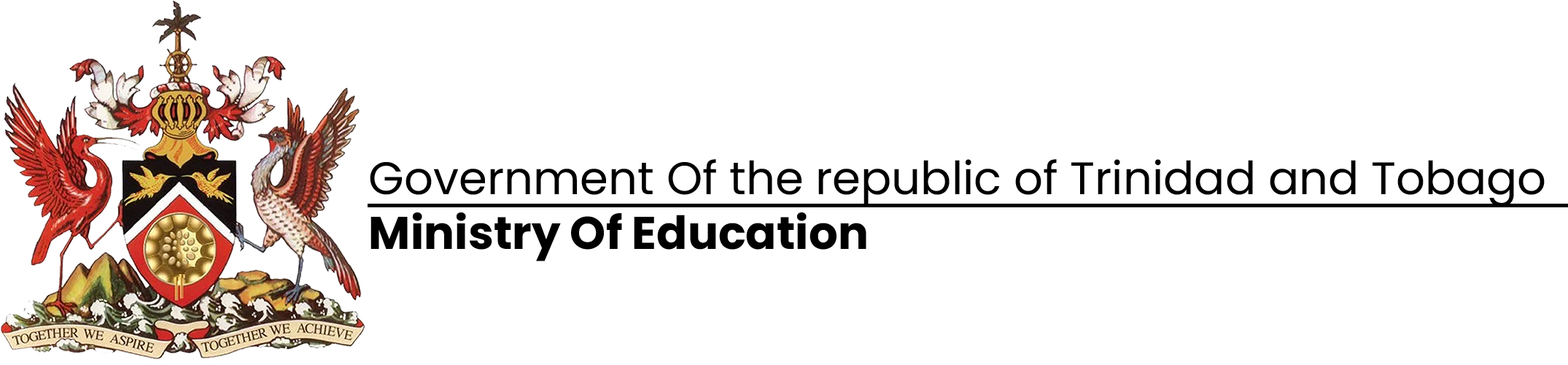
<style>
.page{position:relative;width:1568px;height:365px;background:#ffffff}
.page>*{position:absolute;margin:0}
.t1{font:45.6px "Poppins-Regular";color:#000000}
.t2{font:45.6px "Poppins-Bold";color:#000000}
</style>
<div class="page">
<p class="t1" style="left:370px;top:159px;width:1175px;height:102px">Government Of the republic of Trinidad and Tobago<br><span class="t2">Ministry Of Education</span></p>
</div>
